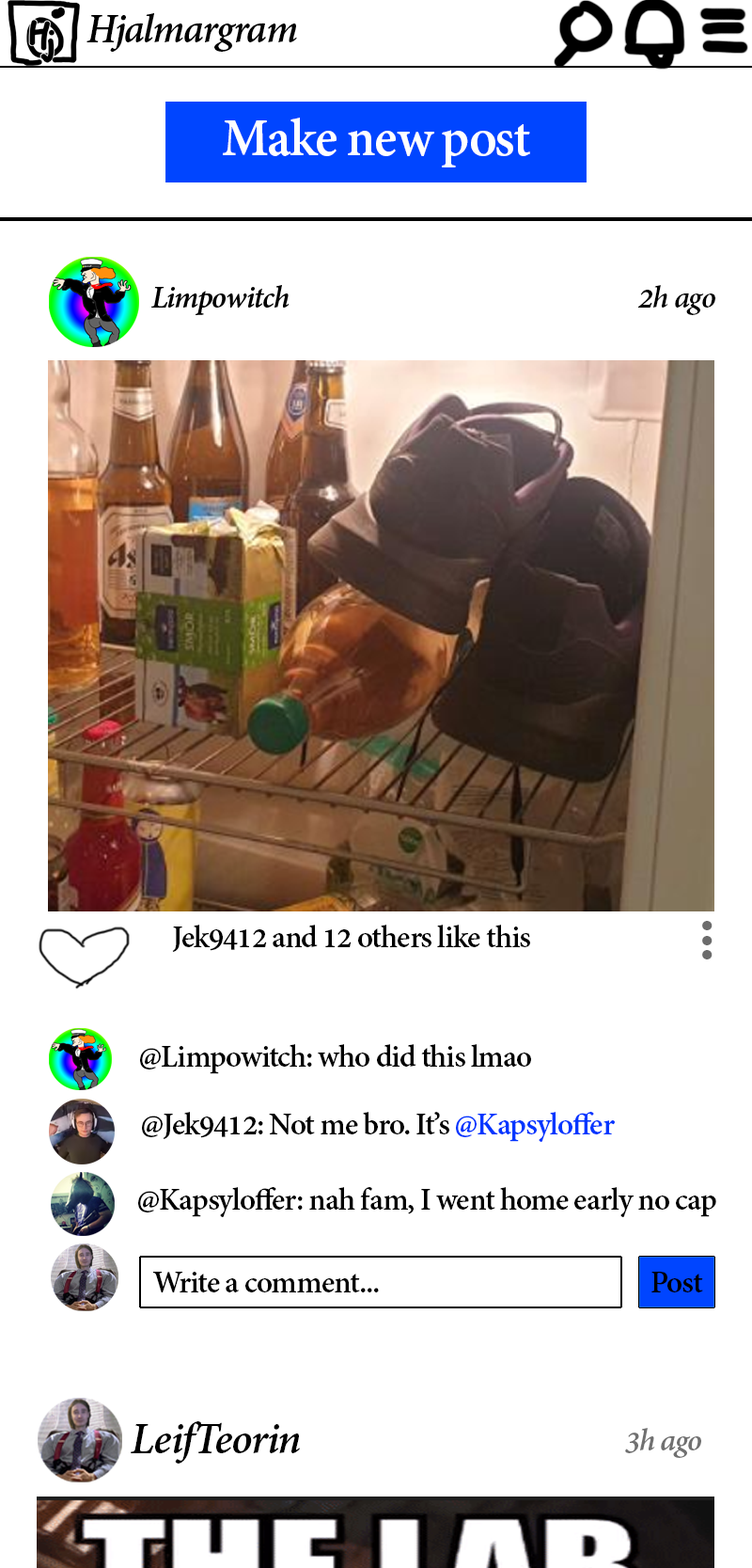
<style>
.page{position:relative;width:752px;height:1568px;background:#ffffff}
.page>*{position:absolute;margin:0}
.t1{font:33.9px "AdobeDevanagari-BoldItalic";letter-spacing:-0.03em;color:#000000}
.t2{font:33.9px "AdobeDevanagari-Bold";letter-spacing:-0.03em;color:#000000}
.t3{font:75.1px "AdobeDevanagari-Bold";letter-spacing:-0.03em;color:#6c6c6c}
.t4{font:33.9px "AdobeDevanagari-Bold";letter-spacing:-0.03em;color:#0036ff}
.t5{font:47.7px "AdobeDevanagari-BoldItalic";letter-spacing:-0.03em;color:#000000}
.t6{font:33.9px "AdobeDevanagari-BoldItalic";letter-spacing:-0.03em;color:#707070}
</style>
<div class="page">
<p class="t1" style="left:639px;top:285px;width:77px;height:30px">2h ago</p>
<p class="t2" style="left:172px;top:925px;width:359px;height:27px">Jek9412 and 12 others like this</p>
<p class="t3" style="left:703px;top:921px;width:10px;height:38px;rotate:90deg">...</p>
<p class="t2" style="left:140px;top:1044px;width:391px;height:30px">@Limpowitch: who did this lmao</p>
<p class="t2" style="left:142px;top:1112px;width:473px;height:30px">@Jek9412: Not me bro. It’s <span class="t4">@Kapsyloffer</span></p>
<p class="t2" style="left:138px;top:1187px;width:579px;height:30px">@Kapsyloffer: nah fam, I went home early no cap</p>
<p class="t2" style="left:153px;top:1272px;width:226px;height:20px">Write a comment...</p>
<p class="t2" style="left:652px;top:1272px;width:52px;height:20px">Post</p>
<p class="t5" style="left:131px;top:1421px;width:169px;height:43px">LeifTeorin</p>
<p class="t6" style="left:626px;top:1428px;width:76px;height:30px">3h ago</p>
</div>
